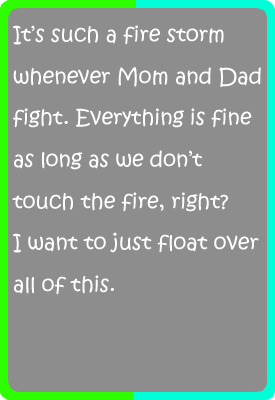
<style>
.page{position:relative;width:275px;height:400px;background:#8d8d8d}
.page>*{position:absolute;margin:0}
.t1{font:20.8px/41.7px "KristenITC-Regular";color:#ffffff}
</style>
<div class="page">
<p class="t1" style="left:12px;top:25px;width:249px;height:270px">It’s such a fire storm<br>whenever Mom and Dad<br>fight. Everything is fine <br>as long as we don’t<br>touch the fire, right?<br>I want to just float over<br>all of this.</p>
</div>
